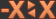
<style>
.page{position:relative;width:56px;height:19px;background:#333333}
.page>*{position:absolute;margin:0}
.t1{font:24px "Ubuntu-Bold";color:#ef935f}
.t2{font:24px "Ubuntu-Bold";color:#f09560}
</style>
<div class="page">
<p class="t1" style="left:1px;top:1px;width:24px;height:17px">-X</p>
<p class="t2" style="left:39px;top:1px;width:16px;height:17px">X</p>
</div>
